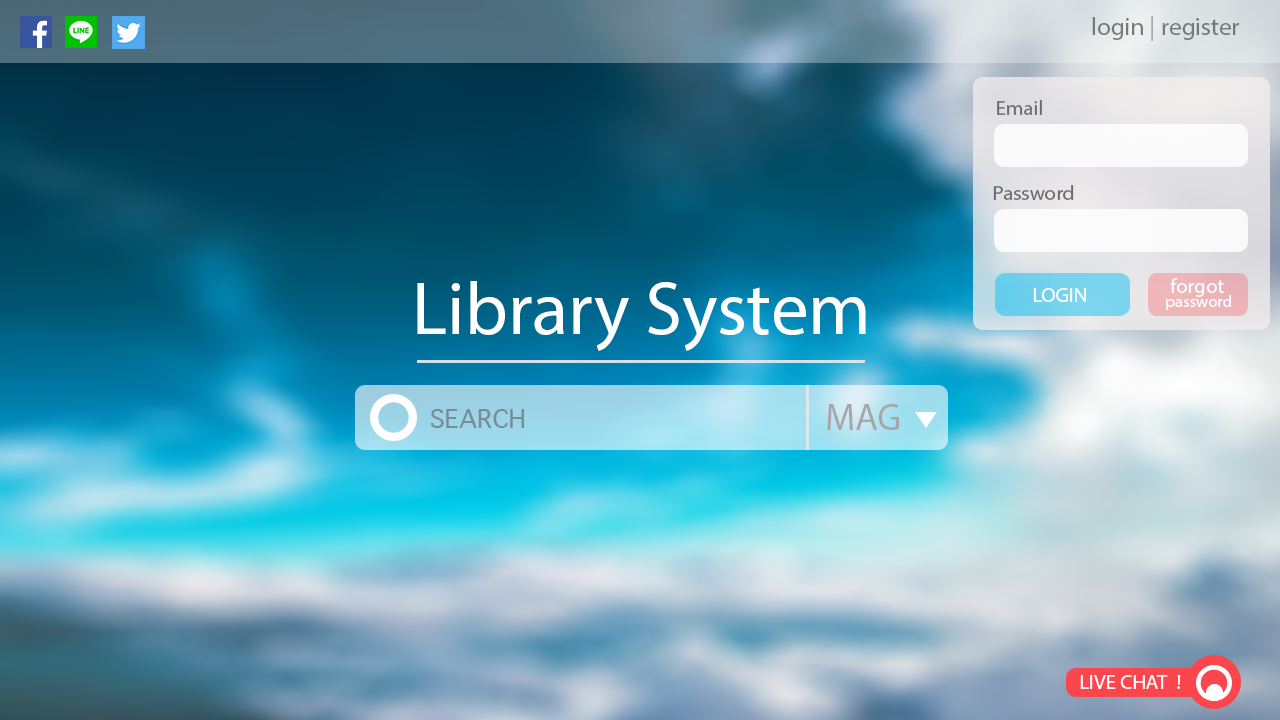
<style>
.page{position:relative;width:1280px;height:720px}
.page>*{position:absolute;margin:0}
.t1{font:25px "MyriadPro-Regular";color:#646464}
.t2{font:25px "MyriadPro-Regular";color:#a29e9e}
.t3{font:20.8px "MyriadPro-Regular";color:#6b6a6a}
.t4{font:75px "MyriadPro-Regular";color:#ffffff}
.t5{font:20.8px "MyriadPro-Regular";color:#ffffff}
.t6{font:16.7px "MyriadPro-Regular";color:#ffffff}
.t7{font:25px "Thonburi";color:#778d94}
.t8{font:37.5px "MyriadPro-Regular";color:#a7a6a6}
</style>
<div class="page">
<p class="t1" style="left:1092px;top:16px;width:147px;height:25px;opacity:0.88">login<span class="t2"> | </span>register</p>
<p class="t3" style="left:997px;top:100px;width:45px;height:15px">Email</p>
<p class="t3" style="left:993px;top:185px;width:81px;height:15px">Password</p>
<p class="t4" style="left:417px;top:281px;width:449px;height:70px">Library System</p>
<p class="t5" style="left:1170px;top:278px;width:54px;height:19px">forgot</p>
<p class="t5" style="left:1033px;top:288px;width:53px;height:14px">LOGIN</p>
<p class="t6" style="left:1166px;top:295px;width:65px;height:15px">password</p>
<p class="t7" style="left:430px;top:409px;width:94px;height:19px">SEARCH</p>
<p class="t8" style="left:827px;top:404px;width:72px;height:26px">MAG</p>
<p class="t5" style="left:1080px;top:675px;width:101px;height:14px">LIVE CHAT  !</p>
</div>
